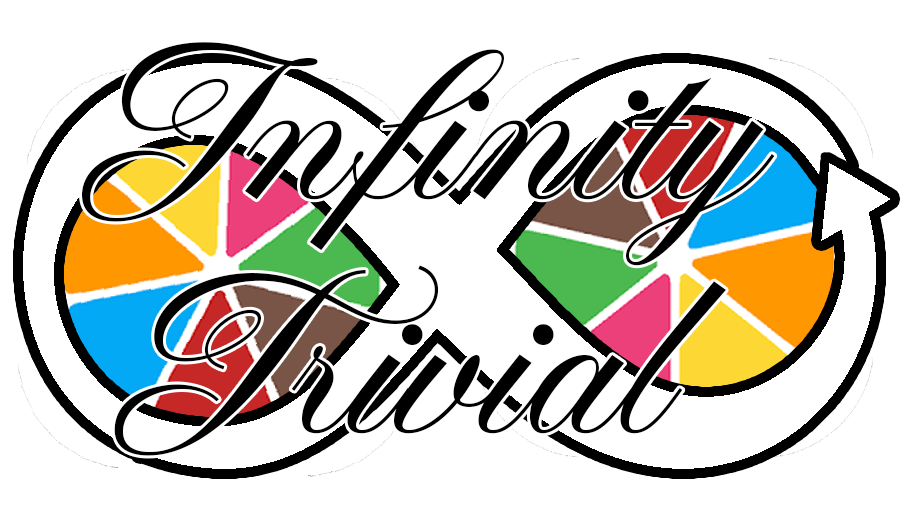
<style>
.page{position:relative;width:909px;height:528px;background:#ffffff}
.page>*{position:absolute;margin:0}
.t1{font:212px "FormaleScriptPERSONALUSE-Regular";color:#000000}
</style>
<div class="page">
<p class="t1" style="left:82px;top:42px;width:693px;height:224px">Infinity</p>
<p class="t1" style="left:114px;top:265px;width:612px;height:191px">Trivial</p>
</div>
